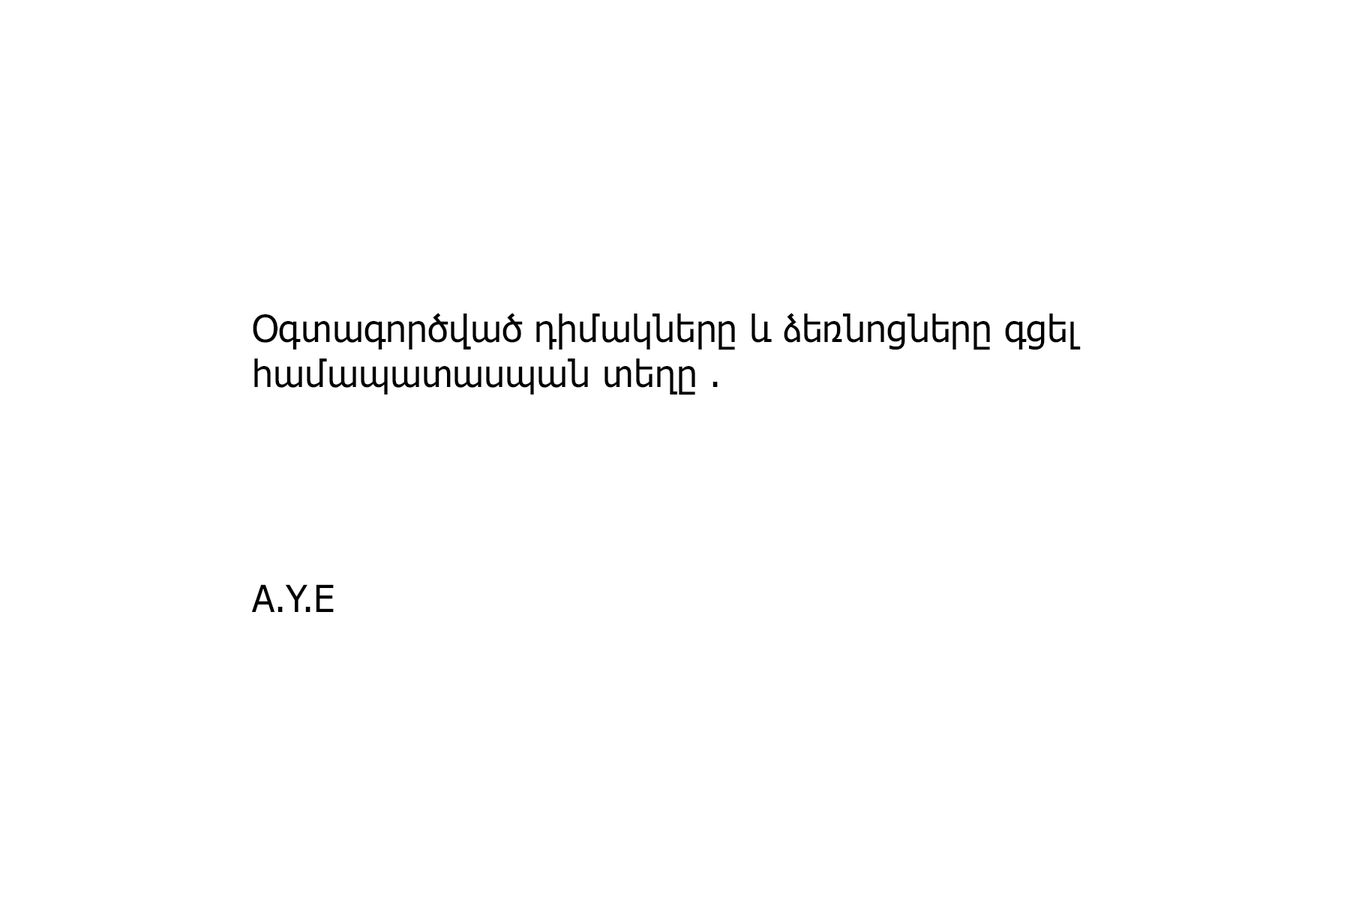
<style>
.page{position:relative;width:1350px;height:900px;background:#ffffff}
.page>*{position:absolute;margin:0}
.t1{font:9px "Tahoma";color:#000000}
</style>
<div class="page">
<p class="t1" style="left:251px;top:313px;width:830px;height:299px">Օգտագործված դիմակները և ձեռնոցները գցել համապատասպան տեղը .<br><br><br><br><br>A.Y.E</p>
</div>
